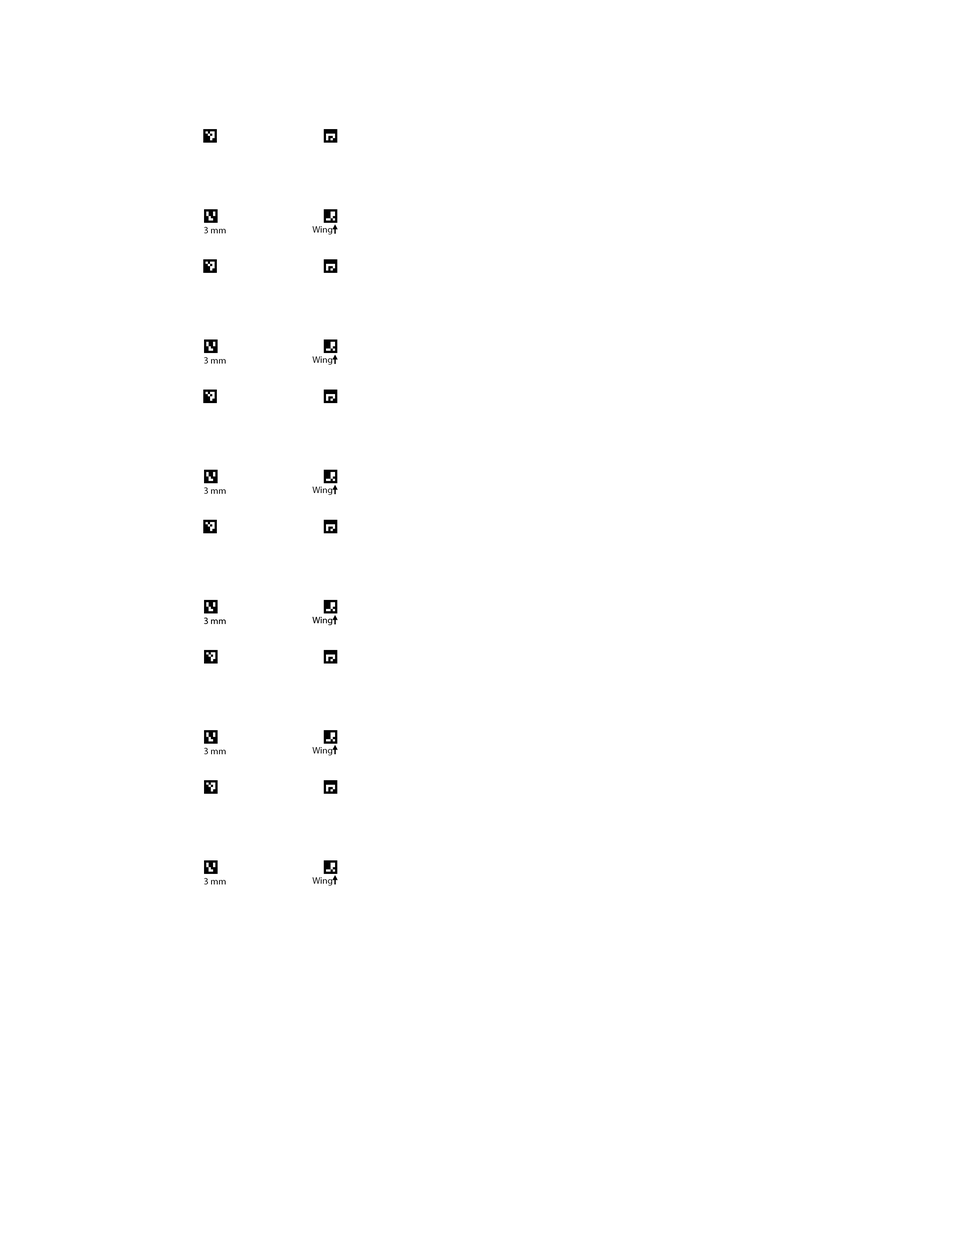
<style>
.page{position:relative;width:960px;height:1242px;background:#ffffff}
.page>*{position:absolute;margin:0}
.t1{font:9.4px "MyriadPro-Regular";color:#000000}
</style>
<div class="page">
<p class="t1" style="left:204px;top:227px;width:22px;height:6px">3 mm</p>
<p class="t1" style="left:312px;top:226px;width:20px;height:9px">Wing</p>
<p class="t1" style="left:204px;top:357px;width:22px;height:7px">3 mm</p>
<p class="t1" style="left:312px;top:356px;width:20px;height:9px">Wing</p>
<p class="t1" style="left:204px;top:487px;width:22px;height:7px">3 mm</p>
<p class="t1" style="left:312px;top:487px;width:20px;height:8px">Wing</p>
<p class="t1" style="left:204px;top:618px;width:22px;height:6px">3 mm</p>
<p class="t1" style="left:204px;top:618px;width:22px;height:6px">3 mm</p>
<p class="t1" style="left:312px;top:617px;width:20px;height:8px">Wing</p>
<p class="t1" style="left:312px;top:617px;width:20px;height:8px">Wing</p>
<p class="t1" style="left:204px;top:748px;width:22px;height:6px">3 mm</p>
<p class="t1" style="left:312px;top:747px;width:20px;height:9px">Wing</p>
<p class="t1" style="left:204px;top:878px;width:22px;height:7px">3 mm</p>
<p class="t1" style="left:312px;top:877px;width:20px;height:9px">Wing</p>
</div>
